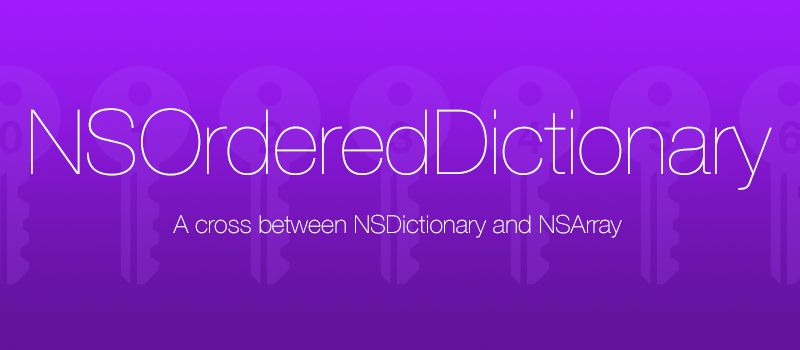
<style>
.page{position:relative;width:800px;height:350px}
.page>*{position:absolute;margin:0}
.t1{font:90px "HelveticaNeue-UltraLight";letter-spacing:-0.007em;color:#ffffff}
.t2{font:45.1px "HelveticaNeue-Bold";letter-spacing:-0.007em;color:#8817d8}
.t3{font:25px "HelveticaNeue-Thin";letter-spacing:-0.007em;color:#ffffff}
</style>
<div class="page">
<p class="t1" style="left:31px;top:108px;width:741px;height:82px">NSOrderedDictionary</p>
<p class="t2" style="left:0px;top:121px;width:22px;height:33px">0</p>
<p class="t2" style="left:388px;top:121px;width:25px;height:33px">3</p>
<p class="t3" style="left:173px;top:214px;width:449px;height:24px">A cross between NSDictionary and NSArray</p>
</div>
